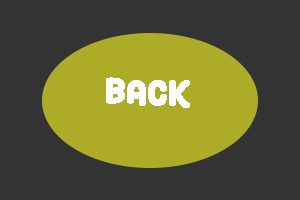
<style>
.page{position:relative;width:300px;height:200px;background:#333333}
.page>*{position:absolute;margin:0}
.t1{font:37.5px "RoundyRainbows";color:#ffffff}
</style>
<div class="page">
<p class="t1" style="left:106px;top:77px;width:84px;height:31px">Back</p>
</div>
